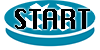
<style>
.page{position:relative;width:100px;height:50px;background:#ffffff}
.page>*{position:absolute;margin:0}
.t1{font:26.7px "Silom";color:#000000}
</style>
<div class="page">
<p class="t1" style="left:15px;top:9px;width:75px;height:20px">START</p>
</div>
